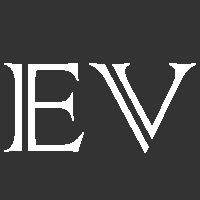
<style>
.page{position:relative;width:200px;height:200px;background:#333333}
.page>*{position:absolute;margin:0}
.t1{font:170px "ColonnaMT";color:#ffffff}
</style>
<div class="page">
<p class="t1" style="left:4px;top:63px;width:192px;height:90px">EV</p>
</div>
